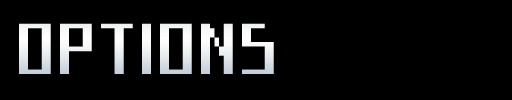
<style>
.page{position:relative;width:512px;height:100px;background:#000000}
.page>*{position:absolute;margin:0}
.t1{font:66.6px "Starcadia";color:#fffefe}
</style>
<div class="page">
<p class="t1" style="left:19px;top:23px;width:255px;height:51px">OPTIONS</p>
</div>
